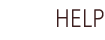
<style>
.page{position:relative;width:105px;height:40px;background:#ffffff}
.page>*{position:absolute;margin:0}
.t1{font:24px "NanumGothic";letter-spacing:0.005em;color:#3c1e1e;scale:0.87 1}
.t2{font:20px "NanumGothic";letter-spacing:0.005em;color:#3c1e1e;scale:0.87 1}
</style>
<div class="page">
<p class="t1" style="left:57px;top:9px;width:47px;height:18px"><span class="t2">   </span>HELP</p>
</div>
